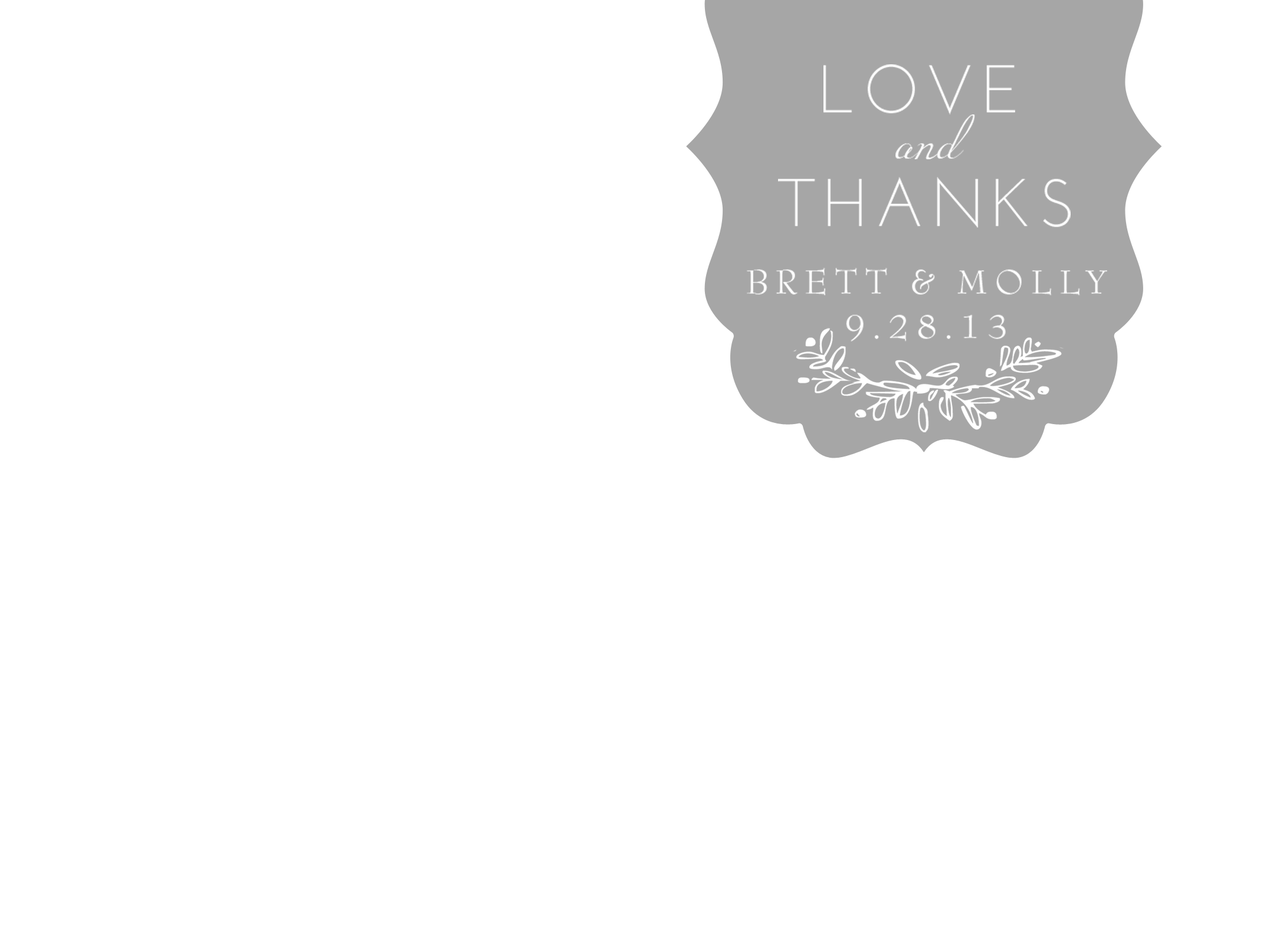
<style>
.page{position:relative;width:1283px;height:929px;background:#ffffff}
.page>*{position:absolute;margin:0}
.t1{font:66.6px "JosefinSansStd-Light";letter-spacing:0.1em;color:#ffffff}
.t2{font:66.6px "Miama";color:#ffffff}
.t3{font:37px "BernhardModernStd-Roman";letter-spacing:0.2em;color:#ffffff}
</style>
<div class="page">
<p class="t1" style="left:824px;top:64px;width:191px;height:50px">LOVE</p>
<p class="t2" style="left:896px;top:114px;width:79px;height:45px">and</p>
<p class="t1" style="left:778px;top:177px;width:293px;height:51px">THANKS</p>
<p class="t3" style="left:747px;top:268px;width:360px;height:74px;text-align:center">BRETT &amp; MOLLY<br>9.28.13</p>
</div>
